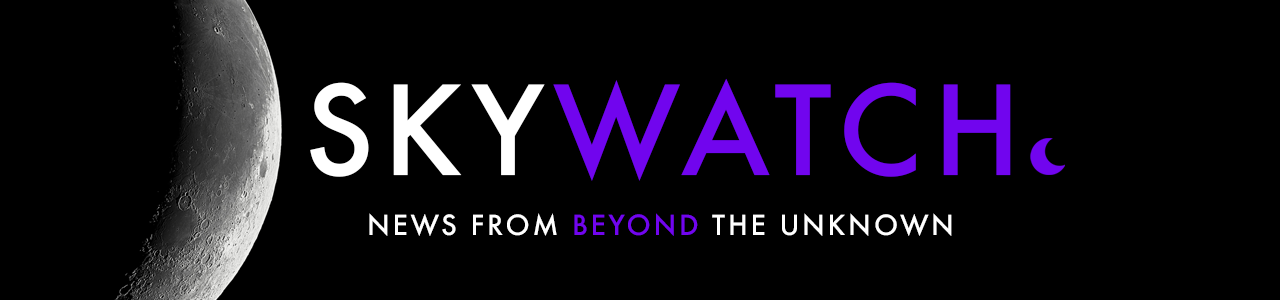
<style>
.page{position:relative;width:1280px;height:300px;background:#000000}
.page>*{position:absolute;margin:0}
.t1{font:120px "Futura-Medium";letter-spacing:0.075em;color:#7105ee}
.t2{font:120px "Futura-Medium";letter-spacing:0.075em;color:#ffffff}
.t3{font:27px "Futura-Medium";letter-spacing:0.1em;color:#ffffff}
.t4{font:27px "Futura-Medium";letter-spacing:0.1em;color:#7105ee}
</style>
<div class="page">
<p class="t1" style="left:310px;top:78px;width:701px;height:103px"><span class="t2">SKY</span>WATCH</p>
<p class="t3" style="left:369px;top:213px;width:583px;height:23px">NEWS FROM <span class="t4">BEYOND </span>THE UNKNOWN</p>
</div>
